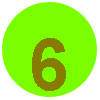
<style>
.page{position:relative;width:100px;height:100px;background:#7bff00}
.page>*{position:absolute;margin:0}
.t1{font:72px "Arial-BoldMT";color:#867c00}
</style>
<div class="page">
<p class="t1" style="left:32px;top:38px;width:34px;height:53px">6</p>
</div>
